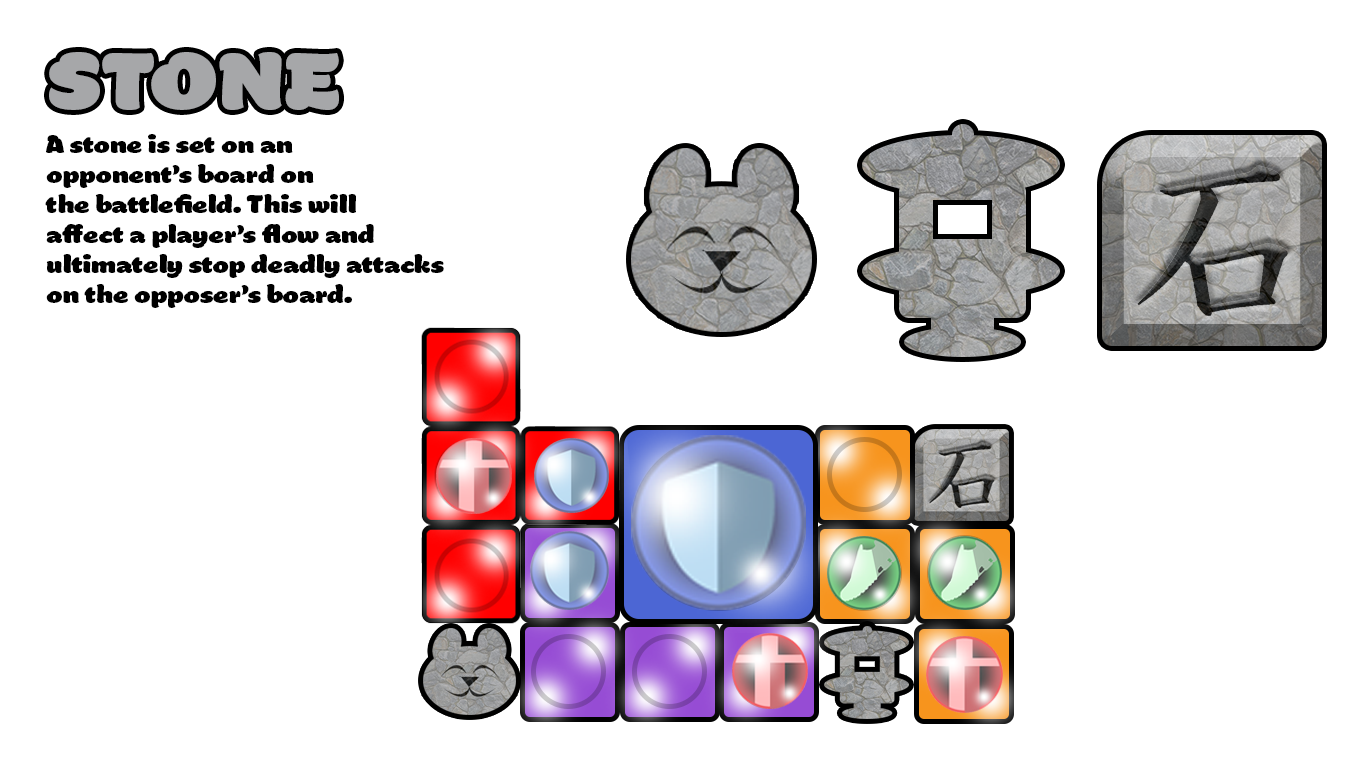
<style>
.page{position:relative;width:1366px;height:768px;background:#ffffff}
.page>*{position:absolute;margin:0}
.t1{font:38.4px "Manteiga-Gorda";color:#a6a7a9}
.t2{font:12px "Manteiga-Gorda";color:#000000}
</style>
<div class="page">
<p class="t1" style="left:49px;top:52px;width:290px;height:58px">STONE</p>
<p class="t2" style="left:45px;top:134px;width:399px;height:174px">A stone is set on an<br>opponent’s board on <br>the battlefield. This will<br>affect a player’s flow and<br>ultimately stop deadly attacks<br>on the opposer’s board.</p>
</div>
